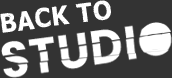
<style>
.page{position:relative;width:172px;height:78px;background:#333333}
.page>*{position:absolute;margin:0}
.t1{font:27px "Dreamer";letter-spacing:0.02em;color:#ffffff}
</style>
<div class="page">
<p class="t1" style="left:0px;top:0px;width:111px;height:33px;rotate:-7deg">BACK TO</p>
</div>
